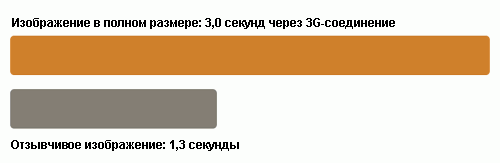
<style>
.page{position:relative;width:500px;height:163px;background:#fcfefc}
.page>*{position:absolute;margin:0}
.t1{font:12px "Arial-BoldMT";color:#000000}
</style>
<div class="page">
<p class="t1" style="left:12px;top:18px;width:383px;height:11px">Изображение в полном размере: 3,0 секунд через 3G-соединение</p>
<p class="t1" style="left:11px;top:140px;width:228px;height:11px">Отзывчивое изображение: 1,3 секунды</p>
</div>
